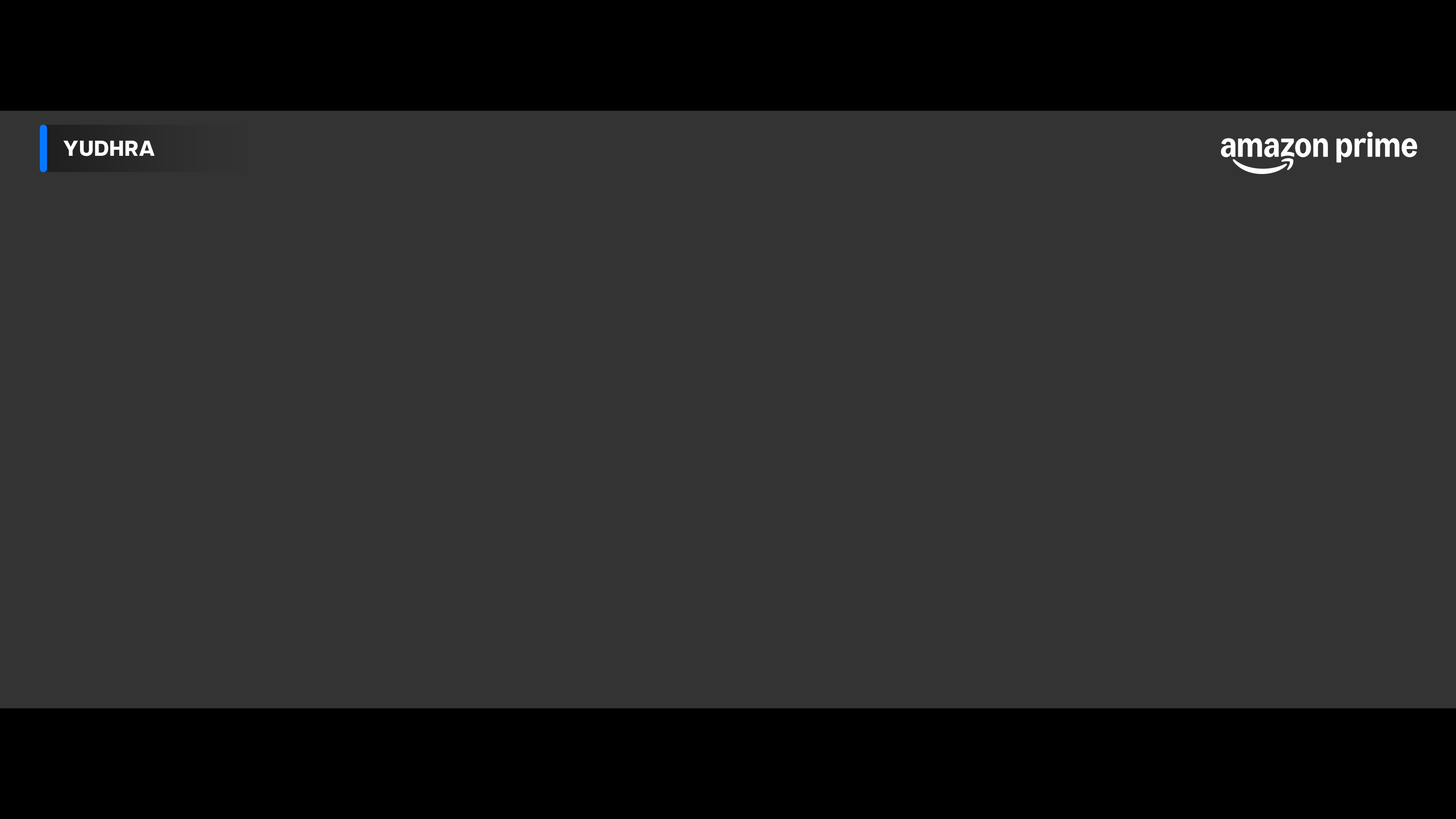
<style>
.page{position:relative;width:1456px;height:819px;background:#333333}
.page>*{position:absolute;margin:0}
.t1{font:21.6px "ArticulatCF-ExtraBold";letter-spacing:0.01em;color:#ffffff;text-transform:uppercase}
</style>
<div class="page">
<p class="t1" style="left:63px;top:141px;width:92px;height:15px">yudhra</p>
</div>
